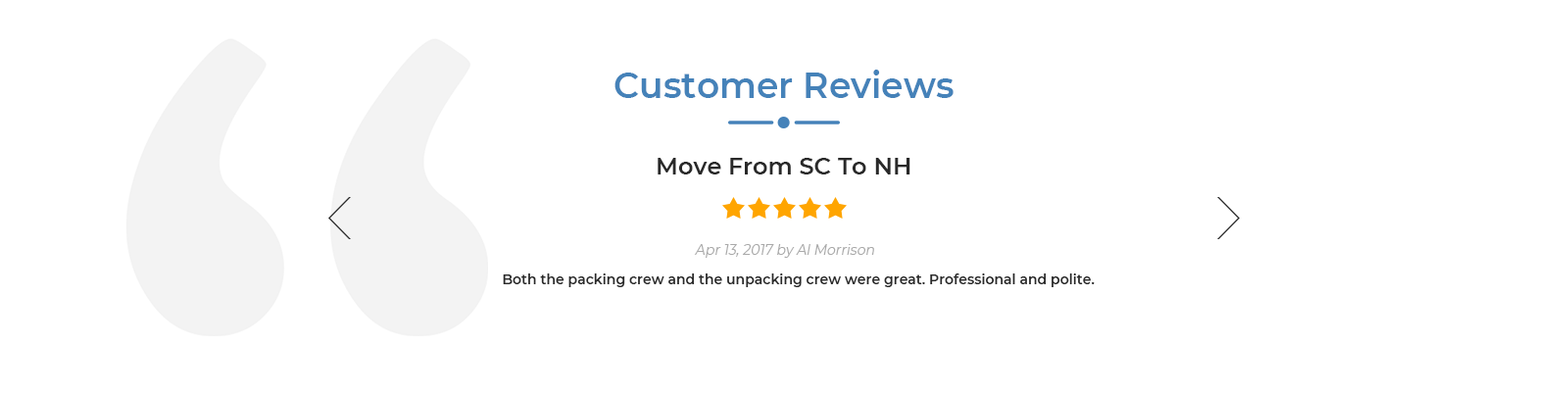
<style>
.page{position:relative;width:1568px;height:395px;background:#ffffff}
.page>*{position:absolute;margin:0}
.t1{font:35.3px "Montserrat-SemiBold";color:#4582b9}
.t2{font:23.5px "Montserrat-SemiBold";color:#292929}
.t3{font:13.7px "Montserrat-Regular";color:#aaaaaa;font-style:italic}
.t4{font:13.7px "Montserrat-SemiBold";color:#292929}
</style>
<div class="page">
<p class="t1" style="left:614px;top:70px;width:340px;height:28px">Customer Reviews</p>
<p class="t2" style="left:658px;top:158px;width:252px;height:16px">Move From SC To NH</p>
<p class="t3" style="left:694px;top:244px;width:180px;height:14px">Apr 13, 2017 by Al Morrison</p>
<p class="t4" style="left:503px;top:273px;width:592px;height:14px">Both the packing crew and the unpacking crew were great. Professional and polite.</p>
</div>
